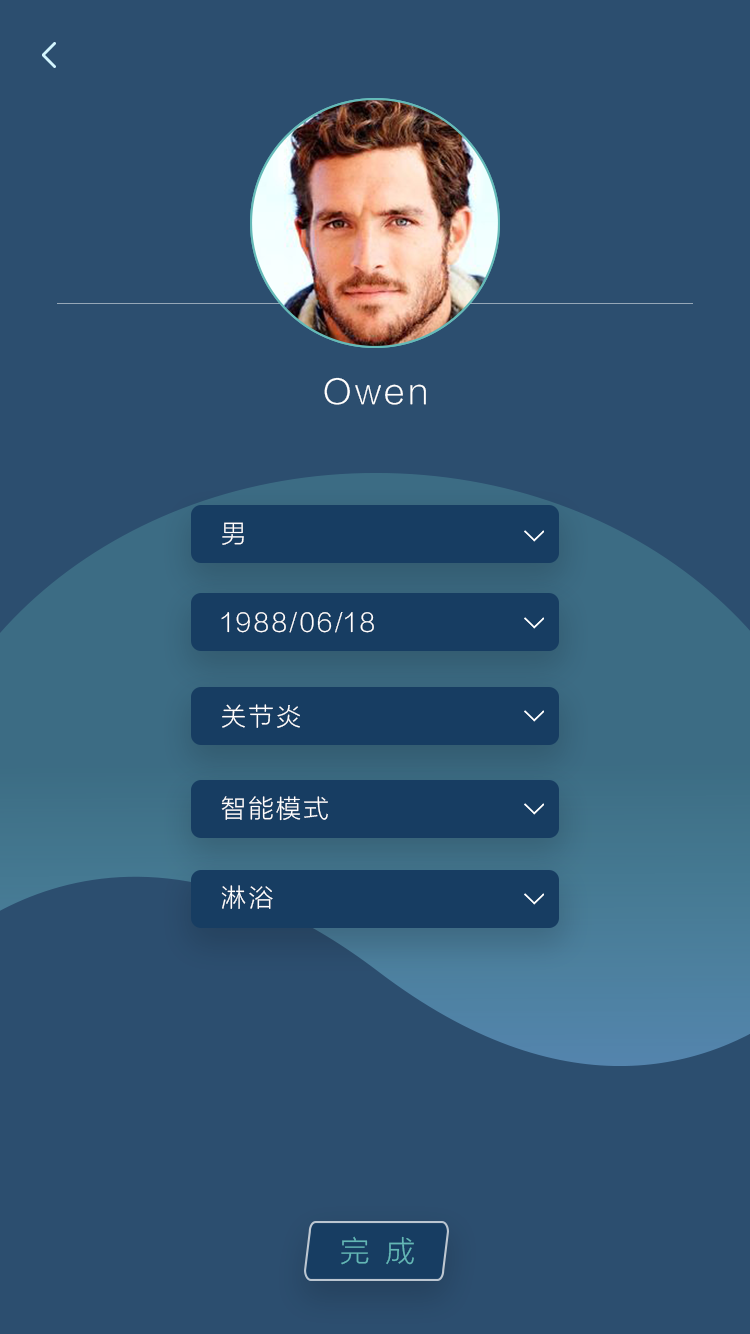
<style>
.page{position:relative;width:750px;height:1334px;background:#2c4e6f}
.page>*{position:absolute;margin:0}
.t1{font:33.3px "FZLTXHJW--GB1-0";letter-spacing:0.1em;color:#ffffff}
.t2{font:25px "FZLTXHJW--GB1-0";letter-spacing:0.1em;color:#ffffff}
.t3{font:29.2px "FZLTXHJW--GB1-0";color:#63b7b6}
</style>
<div class="page">
<p class="t1" style="left:324px;top:377px;width:102px;height:28px">Owen</p>
<p class="t2" style="left:222px;top:522px;width:22px;height:23px">男</p>
<p class="t2" style="left:221px;top:611px;width:153px;height:22px">1988/06/18</p>
<p class="t2" style="left:222px;top:704px;width:78px;height:24px">关节炎</p>
<p class="t2" style="left:221px;top:796px;width:107px;height:25px">智能模式</p>
<p class="t2" style="left:221px;top:885px;width:52px;height:24px">淋浴</p>
<p class="t3" style="left:341px;top:1236px;width:73px;height:29px">完  成</p>
</div>
